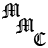
<style>
.page{position:relative;width:48px;height:48px;background:#ffffff}
.page>*{position:absolute;margin:0}
.t1{font:18px "OldEnglishTextMT";color:#000000}
</style>
<div class="page">
<p class="t1" style="left:2px;top:3px;width:18px;height:16px">M</p>
<p class="t1" style="left:16px;top:18px;width:18px;height:16px">M</p>
<p class="t1" style="left:33px;top:32px;width:13px;height:14px">C</p>
</div>
